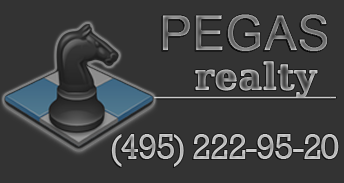
<style>
.page{position:relative;width:344px;height:183px;background:#333333}
.page>*{position:absolute;margin:0}
.t1{font:48px "ArialMT";font-weight:bold}
.t2{font:36px "DejaVuSerif-Bold";font-weight:bold;text-decoration:underline}
.t3{font:36px "Rockwell";letter-spacing:-0.05em;color:#c1c1c1}
</style>
<div class="page">
<p class="t1" style="left:162px;top:14px;width:166px;height:38px">PEGAS</p>
<p class="t2" style="left:154px;top:61px;width:182px;height:38px">realty</p>
<p class="t3" style="left:111px;top:134px;width:228px;height:33px">(495) 222-95-20</p>
</div>
